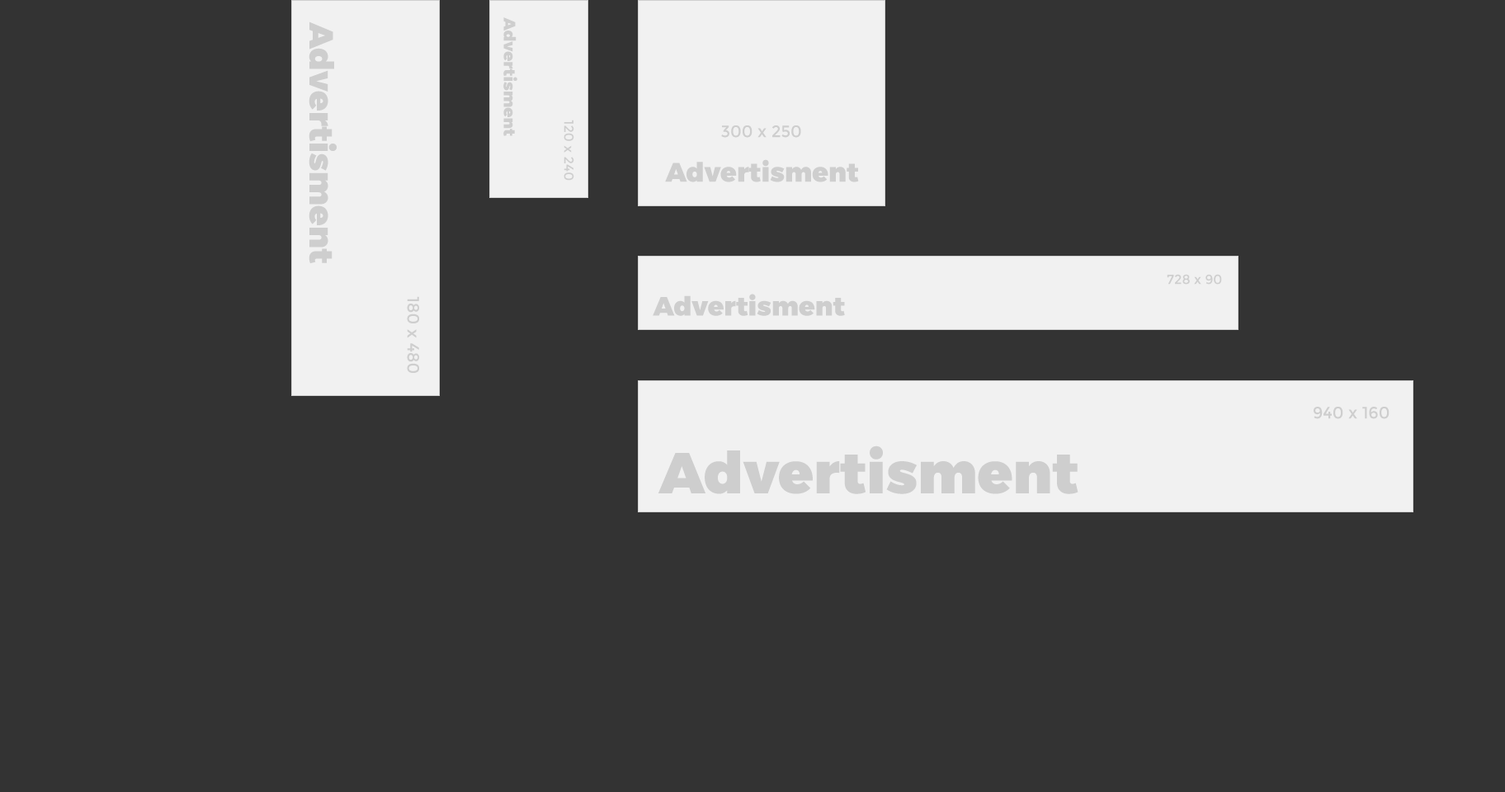
<style>
.page{position:relative;width:1505px;height:792px;background:#333333}
.page>*{position:absolute;margin:0}
.t1{font:16.3px "Montserrat-Black";color:#cecece}
.t2{font:33.2px "Montserrat-Black";color:#cecece}
.t3{font:13.2px "Montserrat-Regular";color:#cecece}
.t4{font:16.5px "Montserrat-Regular";color:#cecece}
.t5{font:26.6px "Montserrat-Black";color:#cecece}
.t6{font:26.4px "Montserrat-Black";color:#cecece}
.t7{font:57.8px "Montserrat-Black";color:#cecece}
</style>
<div class="page">
<p class="t1" style="left:503px;top:17px;width:14px;height:119px;rotate:90deg">Advertisment</p>
<p class="t2" style="left:309px;top:21px;width:28px;height:243px;rotate:90deg">Advertisment</p>
<p class="t3" style="left:564px;top:120px;width:10px;height:61px;rotate:90deg">120 x 240</p>
<p class="t4" style="left:721px;top:125px;width:80px;height:13px">300 x 250</p>
<p class="t5" style="left:665px;top:159px;width:194px;height:23px">Advertisment</p>
<p class="t3" style="left:1167px;top:274px;width:55px;height:11px">728 x 90</p>
<p class="t6" style="left:653px;top:294px;width:192px;height:22px">Advertisment</p>
<p class="t4" style="left:407px;top:296px;width:12px;height:77px;rotate:90deg">180 x 480</p>
<p class="t4" style="left:1314px;top:407px;width:76px;height:12px">940 x 160</p>
<p class="t7" style="left:658px;top:446px;width:421px;height:48px">Advertisment</p>
</div>
